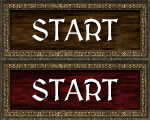
<style>
.page{position:relative;width:150px;height:120px}
.page>*{position:absolute;margin:0}
.t1{font:30px "MedievalSharp";color:#ffffff}
</style>
<div class="page">
<p class="t1" style="left:32px;top:18px;width:86px;height:23px">START</p>
<p class="t1" style="left:32px;top:78px;width:86px;height:23px">START</p>
</div>
